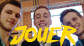
<style>
.page{position:relative;width:84px;height:46px}
.page>*{position:absolute;margin:0}
.t1{font:20px "outrunfuture";color:#fed700}
</style>
<div class="page">
<p class="t1" style="left:10px;top:25px;width:67px;height:21px">Jouer</p>
</div>
